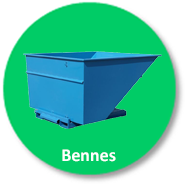
<style>
.page{position:relative;width:185px;height:185px;background:#00cc66}
.page>*{position:absolute;margin:0}
.t1{font:18px "Calibri-Bold";color:#ffffff}
</style>
<div class="page">
<p class="t1" style="left:62px;top:149px;width:54px;height:13px">Bennes</p>
</div>
